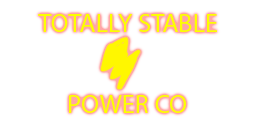
<style>
.page{position:relative;width:256px;height:128px;background:#ffffff}
.page>*{position:absolute;margin:0}
.t1{font:26.4px "MyriadPro-Regular";color:#fcff00}
</style>
<div class="page">
<p class="t1" style="left:38px;top:14px;width:179px;height:18px">TOTALLY STABLE</p>
<p class="t1" style="left:69px;top:95px;width:117px;height:18px">POWER CO</p>
</div>
